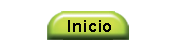
<style>
.page{position:relative;width:177px;height:52px;background:#ffffff}
.page>*{position:absolute;margin:0}
.t1{font:15.9px "Arial-BoldMT";letter-spacing:0.05em;color:#000000}
</style>
<div class="page">
<p class="t1" style="left:68px;top:20px;width:43px;height:12px">Inicio</p>
</div>
